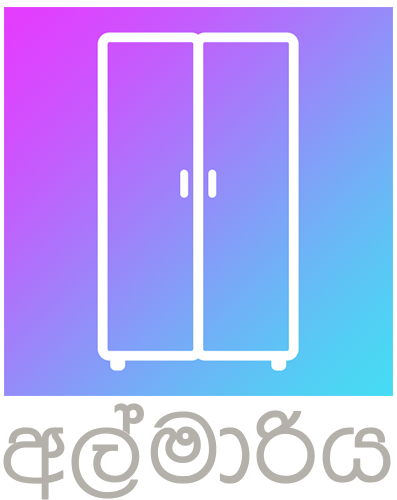
<style>
.page{position:relative;width:397px;height:500px;background:#ffffff}
.page>*{position:absolute;margin:0}
.t1{font:106.4px "4u-Milith-";color:#b4b1ab;font-weight:bold}
</style>
<div class="page">
<p class="t1" style="left:3px;top:403px;width:388px;height:97px">w,audßh</p>
</div>
